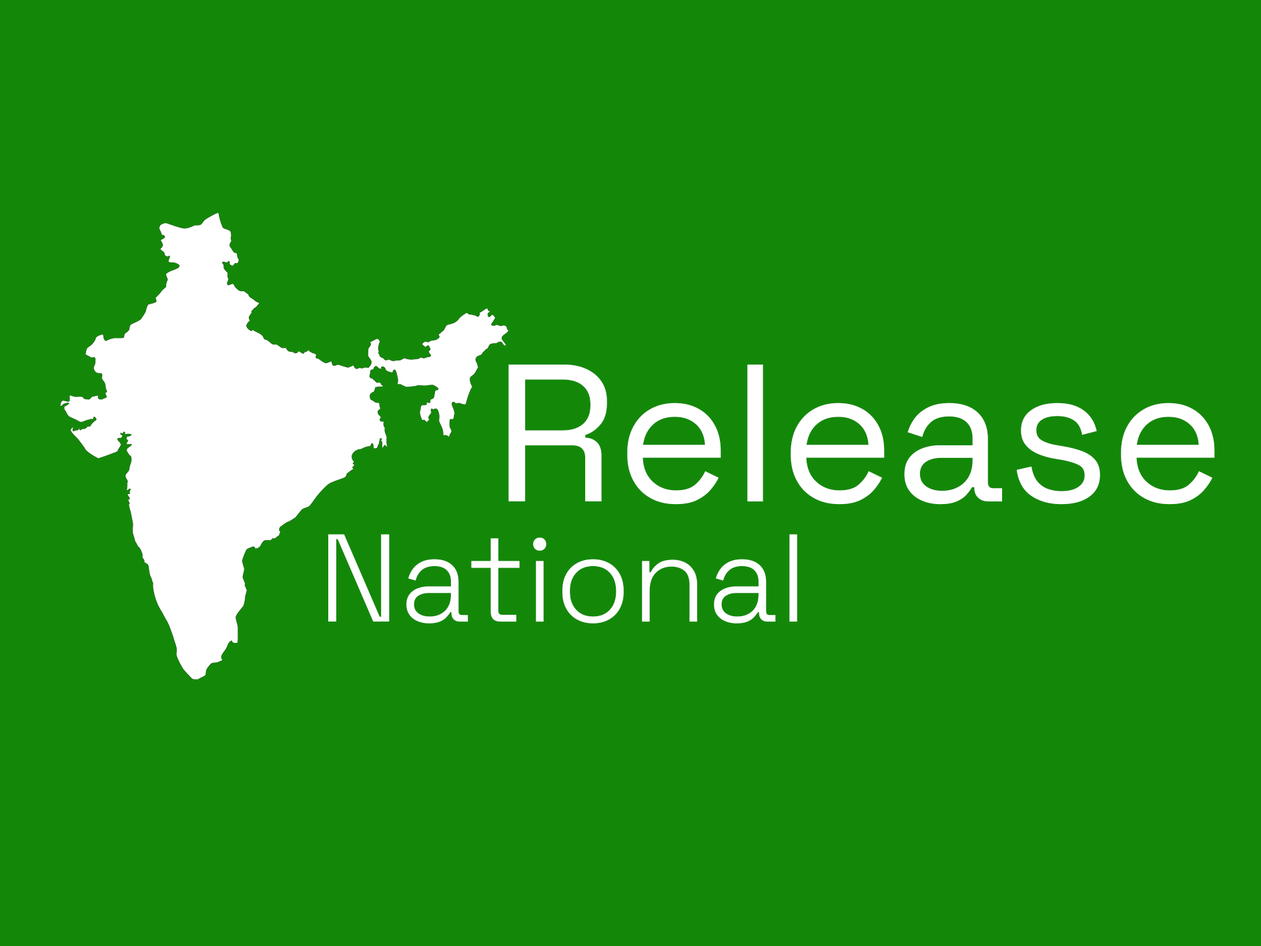
<style>
.page{position:relative;width:1261px;height:946px;background:#138808}
.page>*{position:absolute;margin:0}
.t1{font:195.3px "SpaceGrotesk-Regular";color:#ffffff}
.t2{font:124.4px "SpaceGrotesk-Light";color:#ffffff}
</style>
<div class="page">
<p class="t1" style="left:508px;top:364px;width:707px;height:140px">Release</p>
<p class="t2" style="left:328px;top:534px;width:469px;height:89px">National</p>
</div>
